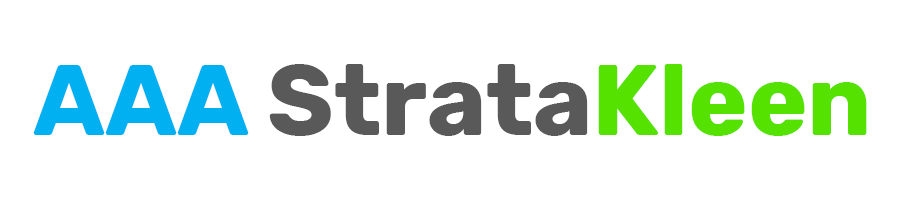
<style>
.page{position:relative;width:900px;height:200px;background:#ffffff}
.page>*{position:absolute;margin:0}
.t1{font:100px "Rubik-Bold";color:#595959}
.t2{font:100px "Rubik-Bold";color:#00b0f0}
.t3{font:100px "Rubik-Bold";color:#56e200}
</style>
<div class="page">
<p class="t1" style="left:33px;top:64px;width:834px;height:72px"><span class="t2">AAA </span>Strata<span class="t3">Kleen</span></p>
</div>
